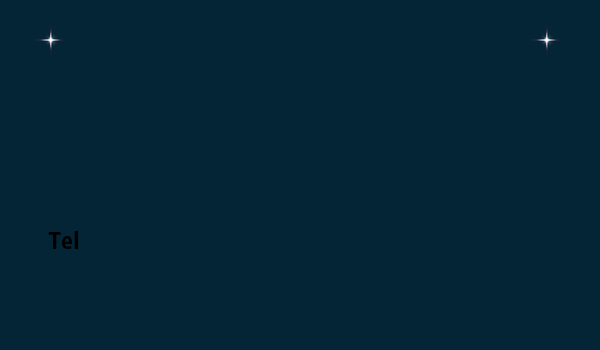
<style>
.page{position:relative;width:600px;height:350px;background:#042536}
.page>*{position:absolute;margin:0}
.t1{font:22px "AdobeGothicStd-Bold";color:#000000}
</style>
<div class="page">
<p class="t1" style="left:48px;top:231px;width:30px;height:18px">Tel</p>
</div>
